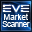
<style>
.page{position:relative;width:32px;height:32px}
.page>*{position:absolute;margin:0}
.t1{font:8px/7px "ArialMT";letter-spacing:-0.05em;color:#ffffff}
.t2{font:8px/7px "ArialMT";color:#ffffff}
</style>
<div class="page">
<p class="t1" style="left:2px;top:13px;width:28px;height:14px;text-align:center"><span class="t2">Market<br></span>Scanner</p>
</div>
